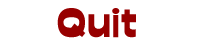
<style>
.page{position:relative;width:200px;height:52px;background:#ffffff}
.page>*{position:absolute;margin:0}
.t1{font:40px "Glockenspiel";color:#970000}
</style>
<div class="page">
<p class="t1" style="left:57px;top:8px;width:79px;height:30px">Quit</p>
</div>
